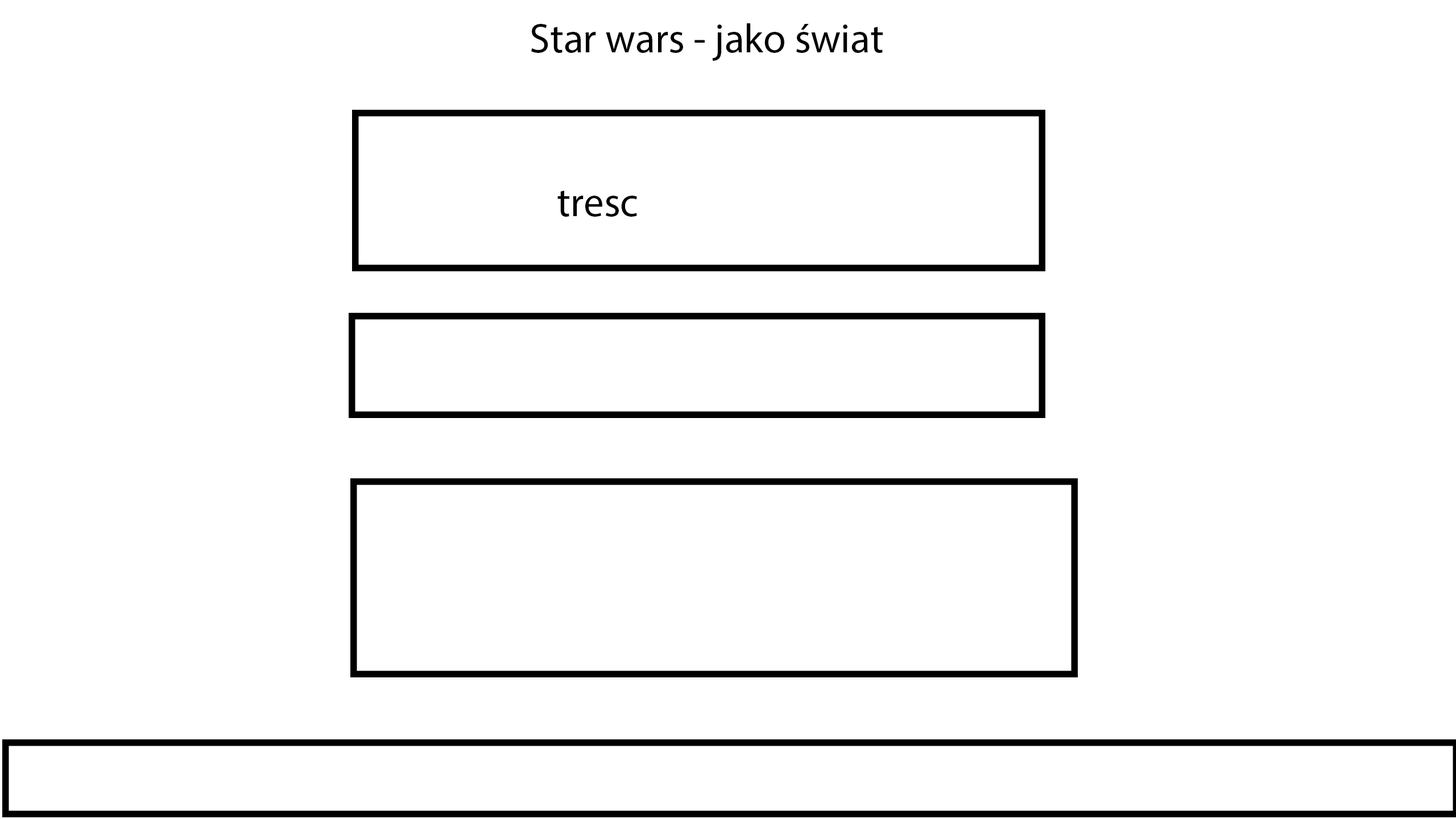
<style>
.page{position:relative;width:1456px;height:819px;background:#ffffff}
.page>*{position:absolute;margin:0}
.t1{font:40.9px "MyriadPro-Regular";color:#000000}
</style>
<div class="page">
<p class="t1" style="left:531px;top:23px;width:352px;height:38px">Star wars - jako świat</p>
<p class="t1" style="left:557px;top:191px;width:80px;height:26px">tresc</p>
</div>
